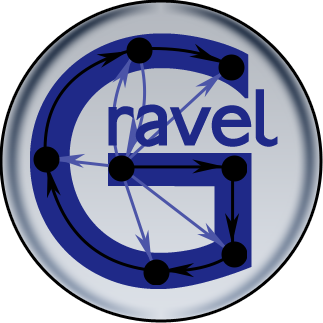
<style>
.page{position:relative;width:323px;height:323px;background:#1f2988}
.page>*{position:absolute;margin:0}
.t1{font:373px "PaddingtonPlain";color:#1f2988}
.t2{font:87px "PaddingtonPlain";color:#1f2988}
</style>
<div class="page">
<p class="t1" style="left:30px;top:33px;width:222px;height:256px">G</p>
<p class="t2" style="left:108px;top:89px;width:170px;height:58px">ravel</p>
</div>
